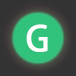
<style>
.page{position:relative;width:76px;height:76px;background:#31c27c}
.page>*{position:absolute;margin:0}
.t1{font:35px "AdobeHeitiStd-Regular";color:#feffff}
</style>
<div class="page">
<p class="t1" style="left:26px;top:24px;width:22px;height:28px">G</p>
</div>
